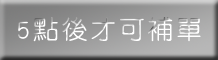
<style>
.page{position:relative;width:218px;height:60px}
.page>*{position:absolute;margin:0}
.t1{font:26px "DFYuan-Lt-HKP-BF";letter-spacing:0.1em;color:#ffffff}
</style>
<div class="page">
<p class="t1" style="left:18px;top:17px;width:183px;height:25px">5點後才可補單</p>
</div>
